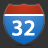
<style>
.page{position:relative;width:48px;height:48px;background:#333333}
.page>*{position:absolute;margin:0}
.t1{font:22.7px "MyriadPro-Semibold";color:#ffffff}
</style>
<div class="page">
<p class="t1" style="left:12px;top:20px;width:23px;height:16px">32</p>
</div>
